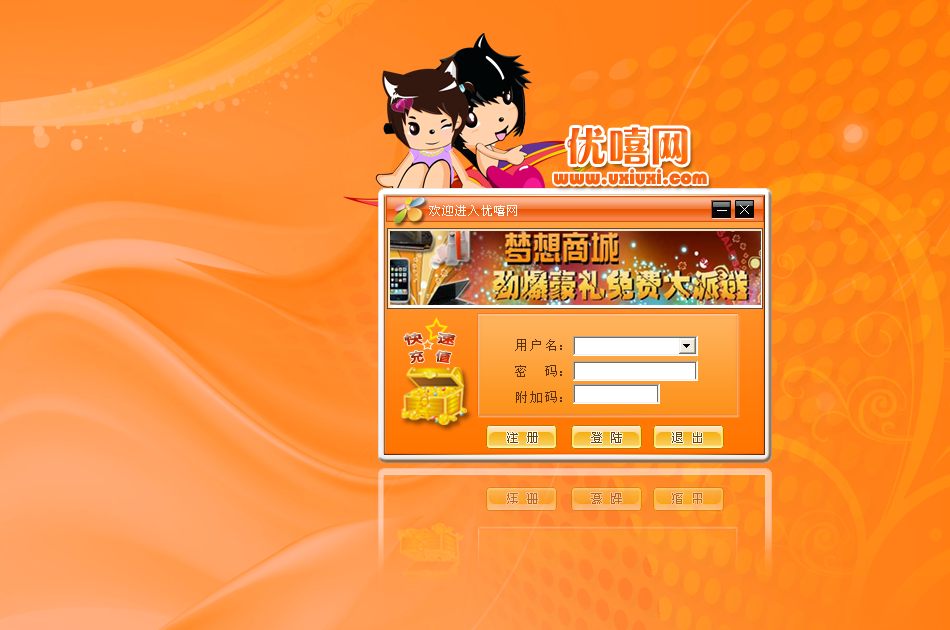
<style>
.page{position:relative;width:950px;height:630px}
.page>*{position:absolute;margin:0}
.t1{font:42px "FZCHYJW--GB1-0";color:#f96c15}
.t2{font:21px "Bauhaus93";letter-spacing:-0.025em;color:#f76411}
.t3{font:12px "SimSun";letter-spacing:0.075em;color:#fdf9f8}
.t4{font:12px/18px "FZY4JW--GB1-0";letter-spacing:-0.01em;scale:1.15 1}
.t5{font:13px/26px "SimSun";letter-spacing:0.075em;color:#593106}
.t6{font:12px/24px "SimSun";letter-spacing:0.075em;color:#593106}
.t7{font:13px/26px "SimSun";letter-spacing:0.14em;color:#593106}
.t8{font:13px/26px "SimSun";letter-spacing:0.2em;color:#593106}
</style>
<div class="page">
<p class="t1" style="left:567px;top:127px;width:121px;height:38px">优嘻网</p>
<p class="t2" style="left:554px;top:169px;width:153px;height:16px">www.uxiuxi.com</p>
<p class="t3" style="left:429px;top:205px;width:88px;height:11px">欢迎进入优嘻网</p>
<p class="t4" style="left:404px;top:332px;width:52px;height:31px">快   速<br>充   值</p>
<p class="t5" style="left:515px;top:339px;width:47px;height:64px"><span class="t6"><br></span><span class="t7">用户名：<br></span>密  码：<br><span class="t7">附加码</span><span class="t8">：</span></p>
</div>
